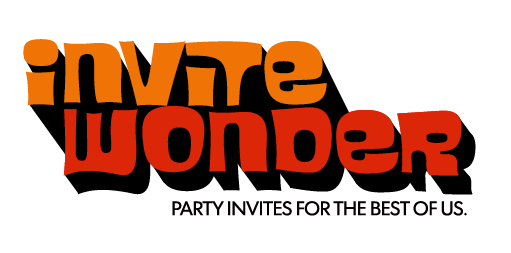
<style>
.page{position:relative;width:511px;height:253px;background:#ffffff}
.page>*{position:absolute;margin:0}
.t1{font:105.6px "Blackcurrant-Squash";letter-spacing:-0.022em;color:#f07305}
.t2{font:105.6px "Blackcurrant-Squash";letter-spacing:-0.022em;color:#db2608}
.t3{font:19.5px "FuturaToday-Normal";letter-spacing:-0.022em;color:#060100;text-transform:uppercase}
</style>
<div class="page">
<p class="t1" style="left:23px;top:39px;width:304px;height:68px">invite</p>
<p class="t2" style="left:63px;top:106px;width:399px;height:70px">wonder</p>
<p class="t2" style="left:63px;top:106px;width:399px;height:70px">wonder</p>
<p class="t3" style="left:172px;top:201px;width:295px;height:15px">party inviteS for the best of us.</p>
</div>
